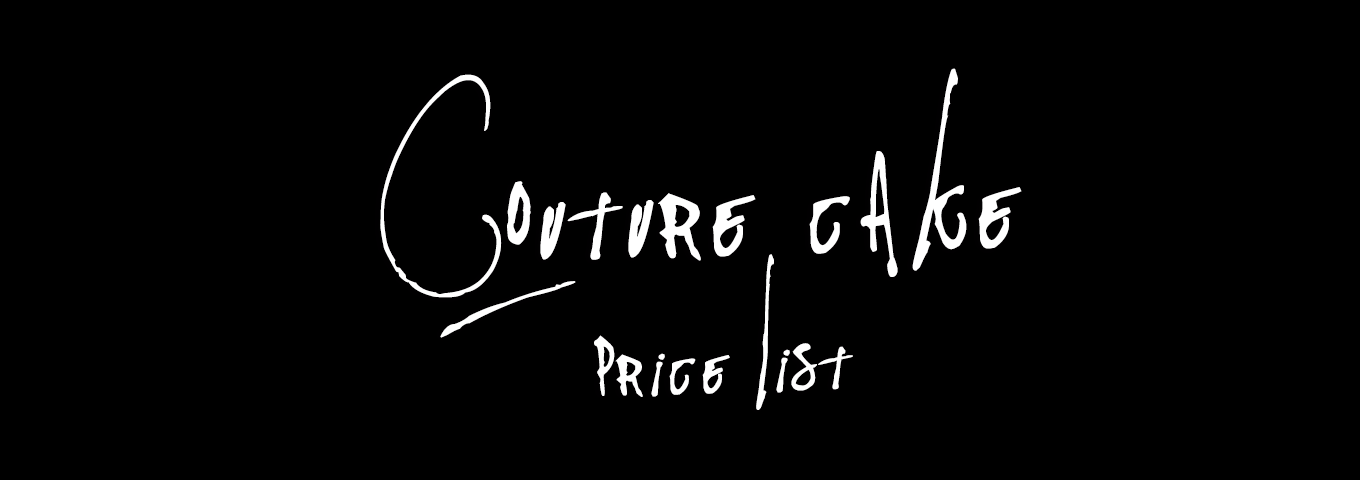
<style>
.page{position:relative;width:1360px;height:480px;background:#000000}
.page>*{position:absolute;margin:0}
.t1{font:299.3px "Pappo'sBluesBandOfficialFont";letter-spacing:0.024em;color:#ffffff}
.t2{font:188.8px "Pappo'sBluesBandOfficialFont";letter-spacing:0.024em;color:#ffffff}
</style>
<div class="page">
<p class="t1" style="left:380px;top:68px;width:642px;height:270px;rotate:-2deg">Couture cake</p>
<p class="t2" style="left:594px;top:254px;width:259px;height:156px;rotate:-2deg">price list</p>
</div>
